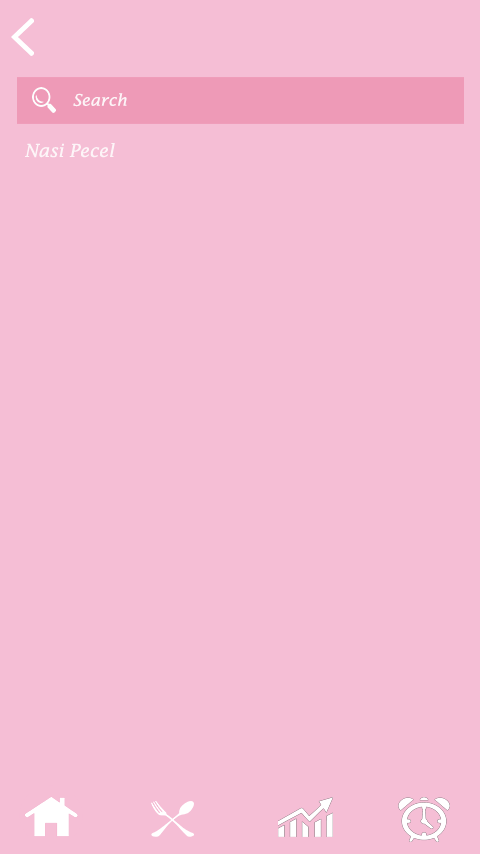
<style>
.page{position:relative;width:480px;height:854px;background:#f5bed5}
.page>*{position:absolute;margin:0}
.t1{font:15.9px "LucidaFax-Italic";color:#fdf5f8}
.t2{font:18px "LucidaFax-Italic";color:#fdf5f8}
</style>
<div class="page">
<p class="t1" style="left:73px;top:93px;width:54px;height:14px">Search</p>
<p class="t2" style="left:25px;top:143px;width:90px;height:15px">Nasi Pecel</p>
</div>
